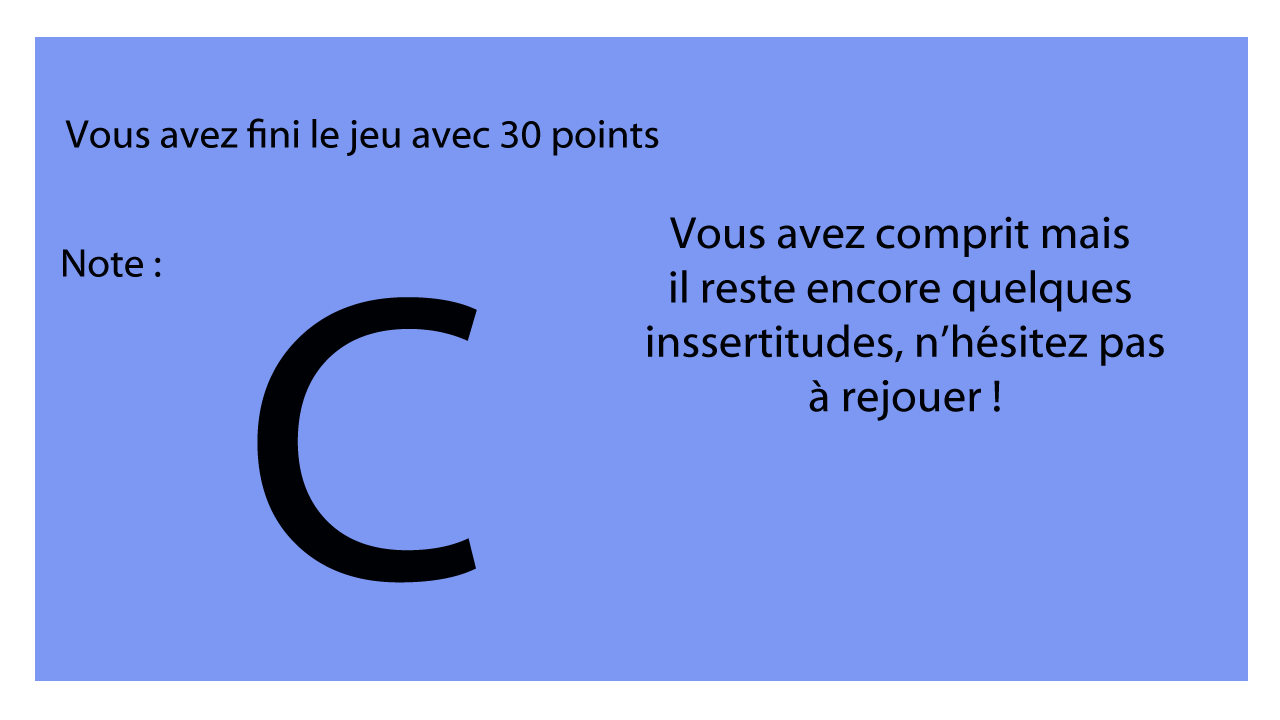
<style>
.page{position:relative;width:1280px;height:720px;background:#7c98f2}
.page>*{position:absolute;margin:0}
.t1{font:40px "MyriadWebPro";color:#000104}
.t2{font:45.3px "MyriadWebPro";color:#000104}
.t3{font:409.4px "MyriadWebPro";color:#000104}
</style>
<div class="page">
<p class="t1" style="left:65px;top:118px;width:594px;height:38px">Vous avez fini le jeu avec 30 points</p>
<p class="t2" style="left:647px;top:216px;width:517px;height:205px;text-align:center">Vous avez comprit mais <br>il reste encore quelques <br>inssertitudes, n’hésitez pas<br>à rejouer !</p>
<p class="t1" style="left:63px;top:249px;width:98px;height:28px">Note :</p>
<p class="t3" style="left:257px;top:297px;width:220px;height:286px">C</p>
</div>
